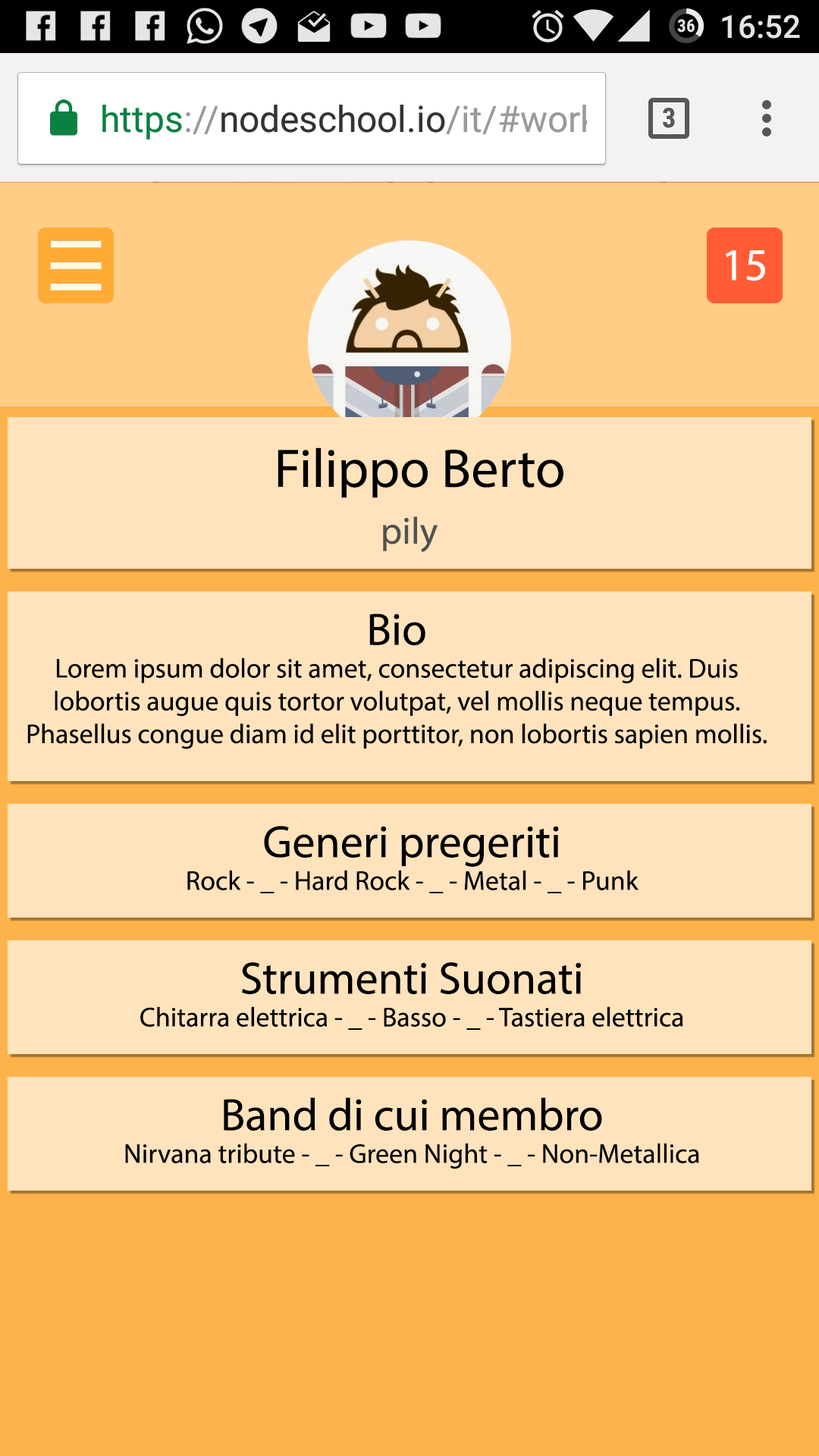
<style>
.page{position:relative;width:819px;height:1456px;background:#ffe3bd}
.page>*{position:absolute;margin:0}
.t1{font:54.6px "MyriadPro-Regular";color:#000000}
.t2{font:37.9px "MyriadPro-Regular";color:#515151}
.t3{font:27.3px "MyriadPro-Regular";color:#000000}
.t4{font:45.5px "MyriadPro-Regular";color:#000000}
</style>
<div class="page">
<p class="t1" style="left:278px;top:447px;width:285px;height:51px">Filippo Berto</p>
<p class="t2" style="left:383px;top:516px;width:55px;height:36px">pily</p>
<p class="t3" style="left:27px;top:613px;width:740px;height:136px;text-align:center"><span class="t4">Bio<br></span>Lorem ipsum dolor sit amet, consectetur adipiscing elit. Duis lobortis augue quis tortor volutpat, vel mollis neque tempus. Phasellus congue diam id elit porttitor, non lobortis sapien mollis.</p>
<p class="t3" style="left:187px;top:826px;width:452px;height:67px;text-align:center"><span class="t4">Generi pregeriti<br></span>Rock - _ - Hard Rock - _ - Metal - _ - Punk</p>
<p class="t3" style="left:140px;top:962px;width:543px;height:68px;text-align:center"><span class="t4">Strumenti Suonati<br></span>Chitarra elettrica - _ - Basso - _ - Tastiera elettrica</p>
<p class="t3" style="left:125px;top:1097px;width:574px;height:72px;text-align:center"><span class="t4">Band di cui membro<br></span>Nirvana tribute - _ - Green Night - _ - Non-Metallica</p>
</div>
